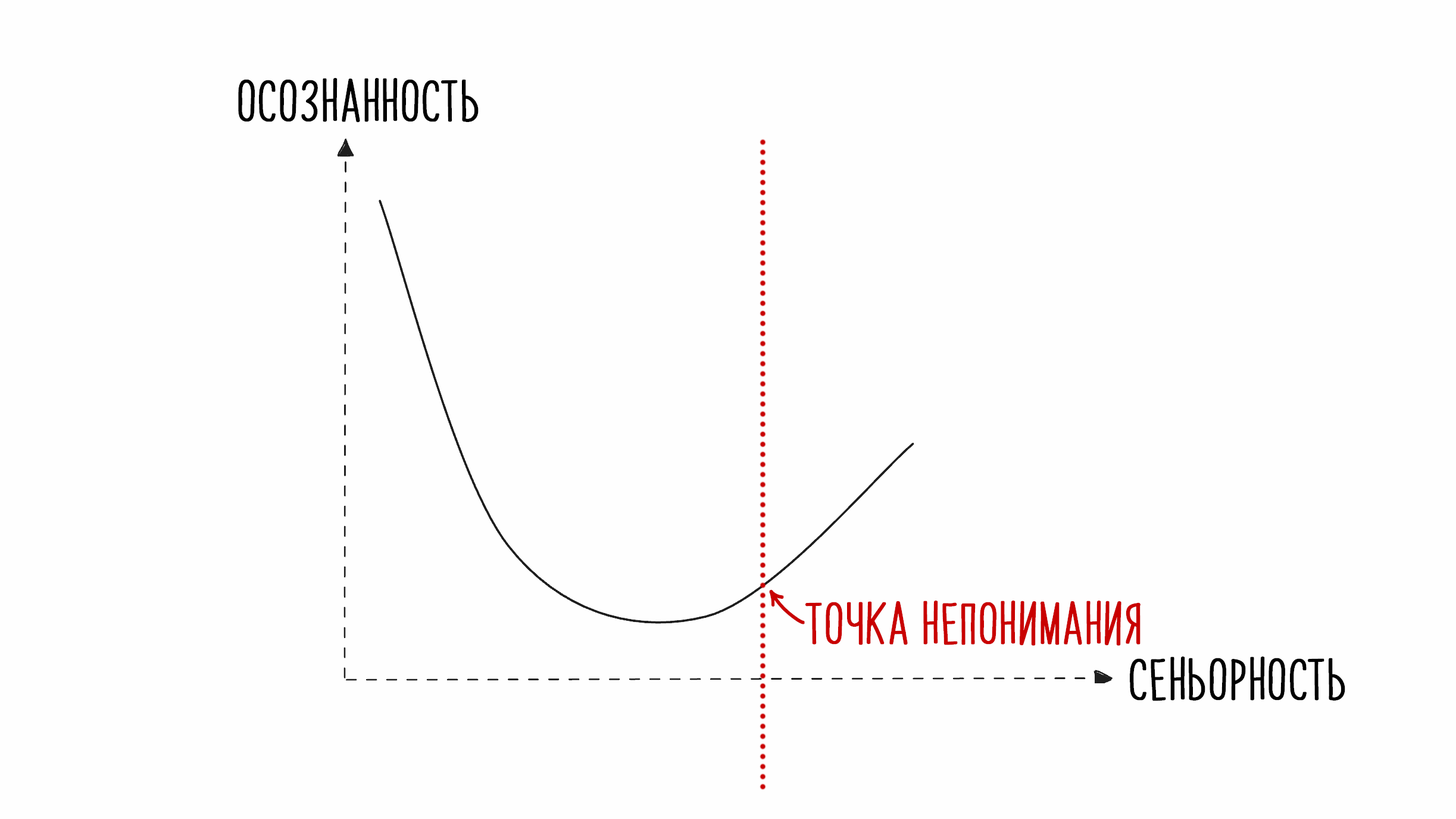
<style>
.page{position:relative;width:1456px;height:819px;background:#fefefe}
.page>*{position:absolute;margin:0}
.t1{font:35.7px "PapayaSunrise";color:#000000;font-weight:bold}
.t2{font:35.7px "PWNewArrows";color:#c90000;font-weight:bold}
.t3{font:35.7px "PapayaSunrise";color:#c90000;font-weight:bold}
</style>
<div class="page">
<p class="t1" style="left:238px;top:78px;width:241px;height:45px">осознанность</p>
<p class="t2" style="left:769px;top:590px;width:36px;height:34px;rotate:-93deg">u</p>
<p class="t3" style="left:805px;top:601px;width:335px;height:45px">точка непонимания</p>
<p class="t1" style="left:1130px;top:657px;width:215px;height:44px">сеньорность</p>
</div>
